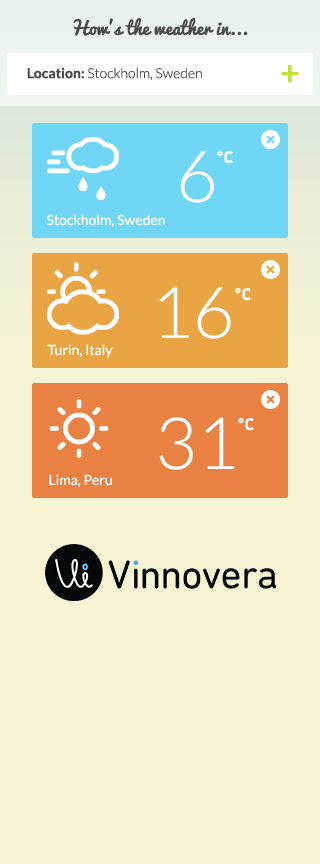
<style>
.page{position:relative;width:320px;height:864px;background:#f7f4d6}
.page>*{position:absolute;margin:0}
.t1{font:18px "Pacifico-Regular";color:#4a4a4a}
.t2{font:34px "Lato-Bold";color:#c7dd34}
.t3{font:14px "Lato-Light";color:#4a4a4a}
.t4{font:14px "Lato-Bold";color:#4a4a4a}
.t5{font:72px "Meteocons";color:#ffffff}
.t6{font:72px "Lato-Light";color:#ffffff}
.t7{font:34px "Meteocons";color:#ffffff}
.t8{font:14px "Lato-Regular";color:#ffffff}
</style>
<div class="page">
<p class="t1" style="left:73px;top:18px;width:175px;height:18px">How’s the weather in...</p>
<p class="t2" style="left:281px;top:65px;width:18px;height:18px">+</p>
<p class="t3" style="left:27px;top:67px;width:175px;height:13px"><span class="t4">Location: </span>Stockholm, Sweden</p>
<p class="t5" style="left:47px;top:137px;width:72px;height:63px">T</p>
<p class="t6" style="left:180px;top:151px;width:34px;height:52px">6</p>
<p class="t7" style="left:217px;top:151px;width:16px;height:13px">*</p>
<p class="t8" style="left:46px;top:214px;width:119px;height:13px">Stockholm, Sweden</p>
<p class="t5" style="left:46px;top:262px;width:73px;height:73px">H</p>
<p class="t6" style="left:159px;top:286px;width:72px;height:53px">16</p>
<p class="t7" style="left:235px;top:288px;width:16px;height:13px">*</p>
<p class="t8" style="left:47px;top:344px;width:66px;height:14px">Turin, Italy</p>
<p class="t5" style="left:49px;top:399px;width:60px;height:59px">B</p>
<p class="t6" style="left:159px;top:417px;width:76px;height:53px">31</p>
<p class="t7" style="left:238px;top:418px;width:16px;height:13px">*</p>
<p class="t8" style="left:49px;top:474px;width:63px;height:13px">Lima, Peru</p>
</div>
